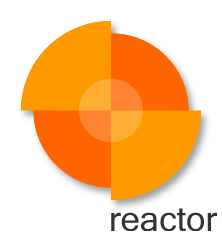
<style>
.page{position:relative;width:222px;height:236px;background:#ffffff}
.page>*{position:absolute;margin:0}
.t1{font:55px "Kartika";color:#333333}
</style>
<div class="page">
<p class="t1" style="left:111px;top:208px;width:106px;height:23px">reactor</p>
</div>
